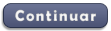
<style>
.page{position:relative;width:111px;height:31px}
.page>*{position:absolute;margin:0}
.t1{font:16px "BerlinSansFBDemi-Bold";letter-spacing:0.075em;color:#eaeaea}
</style>
<div class="page">
<p class="t1" style="left:15px;top:9px;width:81px;height:13px">Continuar</p>
</div>
